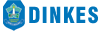
<style>
.page{position:relative;width:103px;height:31px;background:#ffffff}
.page>*{position:absolute;margin:0}
.t1{font:21.6px "Swiss721BT-BlackCondensed";letter-spacing:0.045em;color:#0075ba}
</style>
<div class="page">
<p class="t1" style="left:29px;top:6px;width:69px;height:18px">DINKES</p>
</div>
